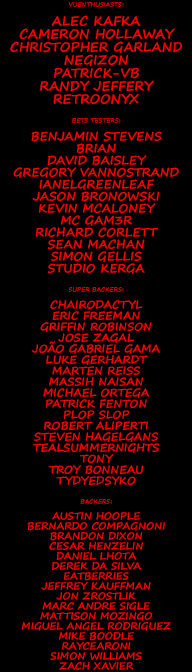
<style>
.page{position:relative;width:192px;height:672px;background:#000000}
.page>*{position:absolute;margin:0}
.t1{font:13px/13px "SegoePrint-Bold";color:#ff0000}
.t2{font:6px/6px "SegoePrint-Bold";color:#ff0000}
.t3{font:12px/12px "SegoePrint-Bold";color:#ff0000}
.t4{font:11px/11px "SegoePrint-Bold";color:#ff0000}
.t5{font:10px/10px "SegoePrint-Bold";color:#ff0000}
</style>
<div class="page">
<p class="t1" style="left:10px;top:2px;width:172px;height:103px;text-align:center"><span class="t2">VUENTHUSIASTS:<br> <br></span>ALEC KAFKA<br>CAMERON HOLLAWAY<br>CHRISTOPHER GARLAND<br>NEGIZON<br>PATRICK-VB<br>RANDY JEFFERY<br>RETROONYX</p>
<p class="t3" style="left:13px;top:118px;width:166px;height:156px;text-align:center"><span class="t2">BETS TESTERS:<br> <br></span>BENJAMIN STEVENS<br>BRIAN<br>DAVID BAISLEY<br>GREGORY VANNOSTRAND<br>IANELGREENLEAF<br>JASON BRONOWSKI<br>KEVIN MCALONEY<br>MC GAM3R<br>RICHARD CORLETT<br>SEAN MACHAN<br>SIMON GELLIS<br>STUDIO KERGA</p>
<p class="t4" style="left:32px;top:287px;width:128px;height:198px;text-align:center"><span class="t2">SUPER BACKERS:<br> <br></span>CHAIRODACTYL<br>ERIC FREEMAN<br>GRIFFIN ROBINSON<br>JOSE ZAGAL<br>JOÃO GABRIEL GAMA<br>LUKE GERHARDT<br>MARTEN REISS<br>MASSIH NAISAN<br>MICHAEL ORTEGA<br>PATRICK FENTON<br>PLOP SLOP<br>ROBERT ALIPERTI<br>STEVEN HAGELGANS<br>TEALSUMMERNIGHTS<br>TONY<br>TROY BONNEAU<br>TYDYEDSYKO</p>
<p class="t5" style="left:21px;top:499px;width:150px;height:171px;text-align:center"><span class="t2">BACKERS:<br> <br></span>AUSTIN HOOPLE<br>BERNARDO COMPAGNONI<br>BRANDON DIXON<br>CESAR HENZELIN<br>DANIEL LHOTA<br>DEREK DA SILVA<br>EATBERRIES<br>JEFFREY KAUFFMAN<br>JON ZROSTLIK<br>MARC ANDRE SIGLE<br>MATTISON MOZINGO<br>MIGUEL ANGEL RODRIGUEZ<br>MIKE BOODLE<br>RAYCEARONI<br>SIMON WILLIAMS<br>ZACH XAVIER</p>
</div>
